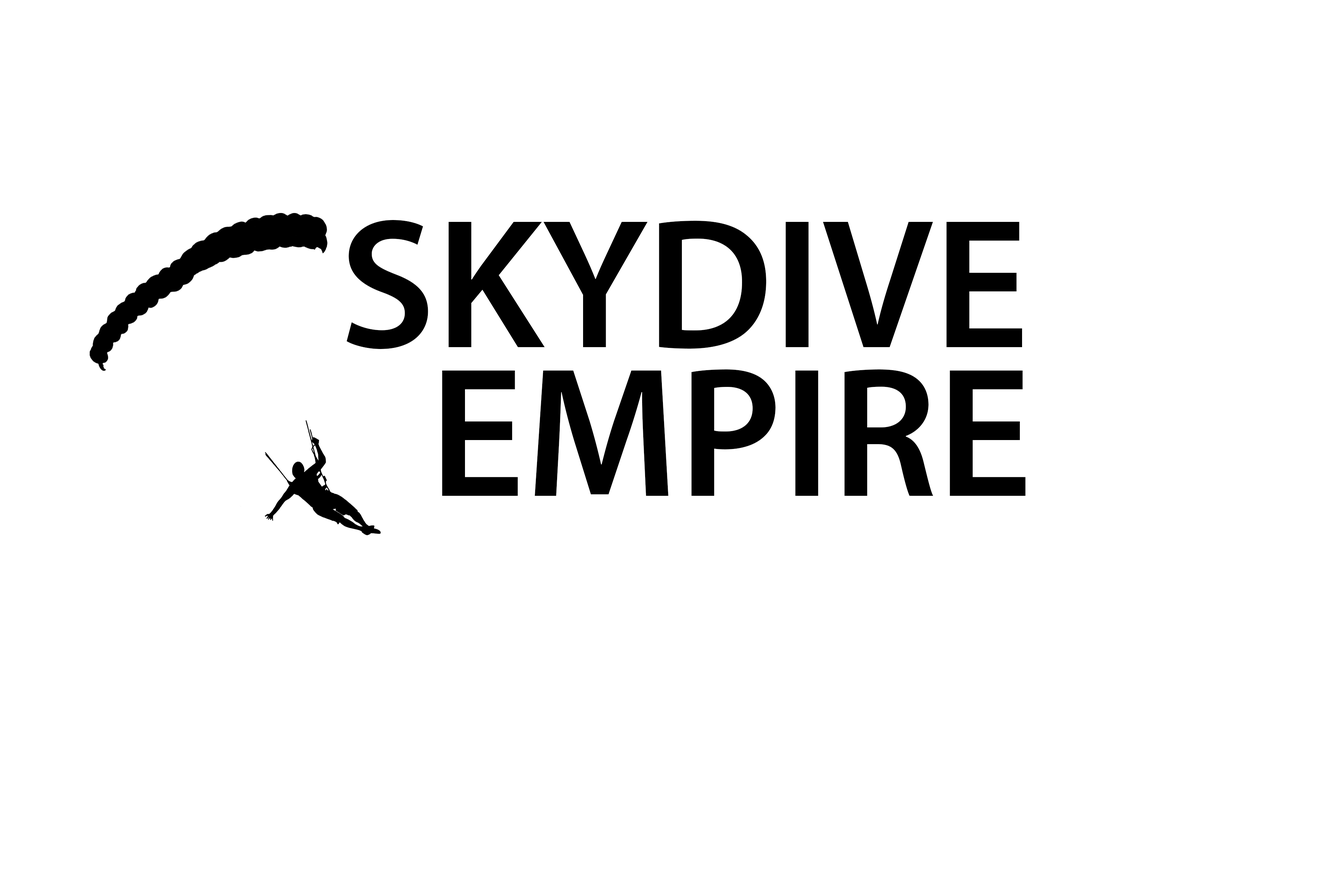
<style>
.page{position:relative;width:1337px;height:892px;background:#ffffff}
.page>*{position:absolute;margin:0}
.t1{font:185.8px "MyriadPro-Semibold";color:#000000}
</style>
<div class="page">
<p class="t1" style="left:347px;top:220px;width:675px;height:129px">SKYDIVE</p>
<p class="t1" style="left:442px;top:369px;width:584px;height:127px">EMPIRE</p>
</div>
